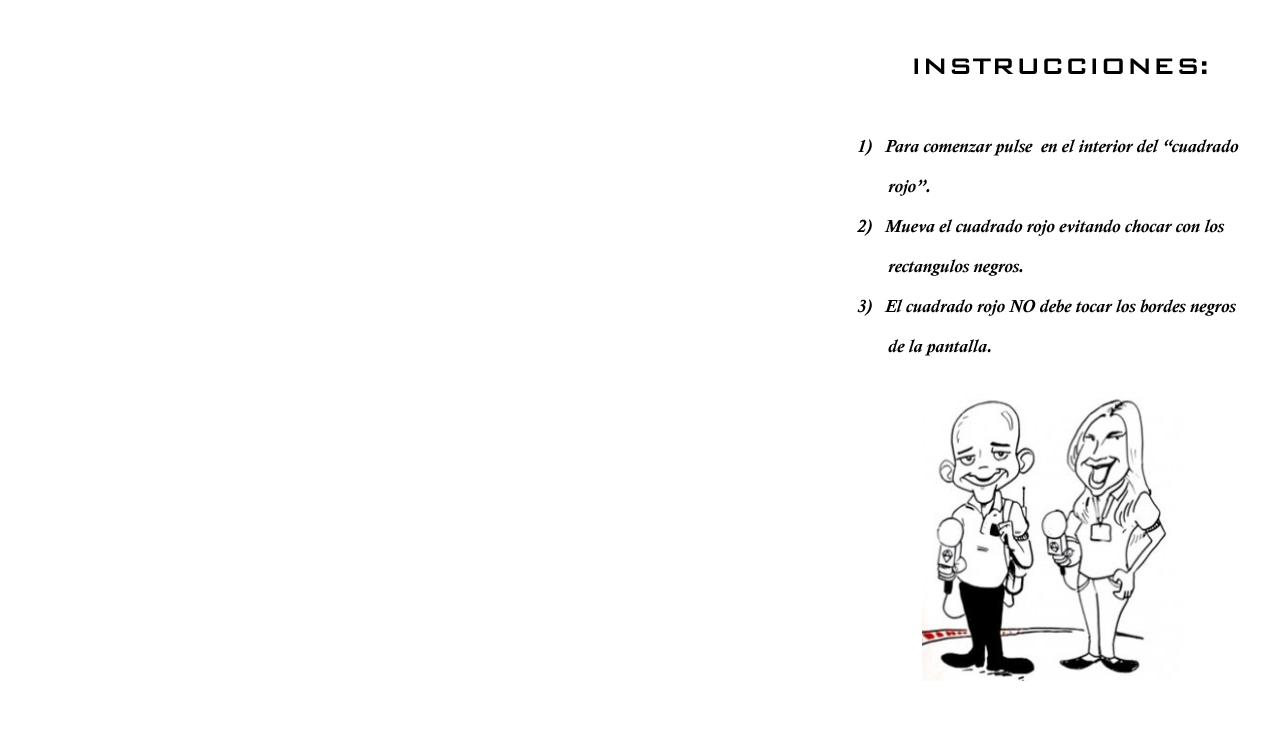
<style>
.page{position:relative;width:1270px;height:750px;background:#ffffff}
.page>*{position:absolute;margin:0}
.t1{font:18px/40px "CalistoMT-BoldItalic";color:#000000}
.t2{font:30px/4.3px "BankGothicBT-Medium";color:#000000}
.t3{font:18px/48px "CalistoMT-BoldItalic";color:#000000}
</style>
<div class="page">
<p class="t1" style="left:857px;top:58px;width:382px;height:298px;text-align:center"><span class="t2">INSTRUCCIONES:<br><br><br><br><br><br><br><br></span>1<span class="t3">)   Para comenzar p</span>ulse  en el interior del “cuadrado<br>       rojo”.                          <br>2)   Mueva el cuadrado rojo evitando chocar con los <br>       rectangulos negros.     <br>3)   El cuadrado rojo NO debe tocar los bordes negros   <br>       de la pantalla.</p>
</div>
